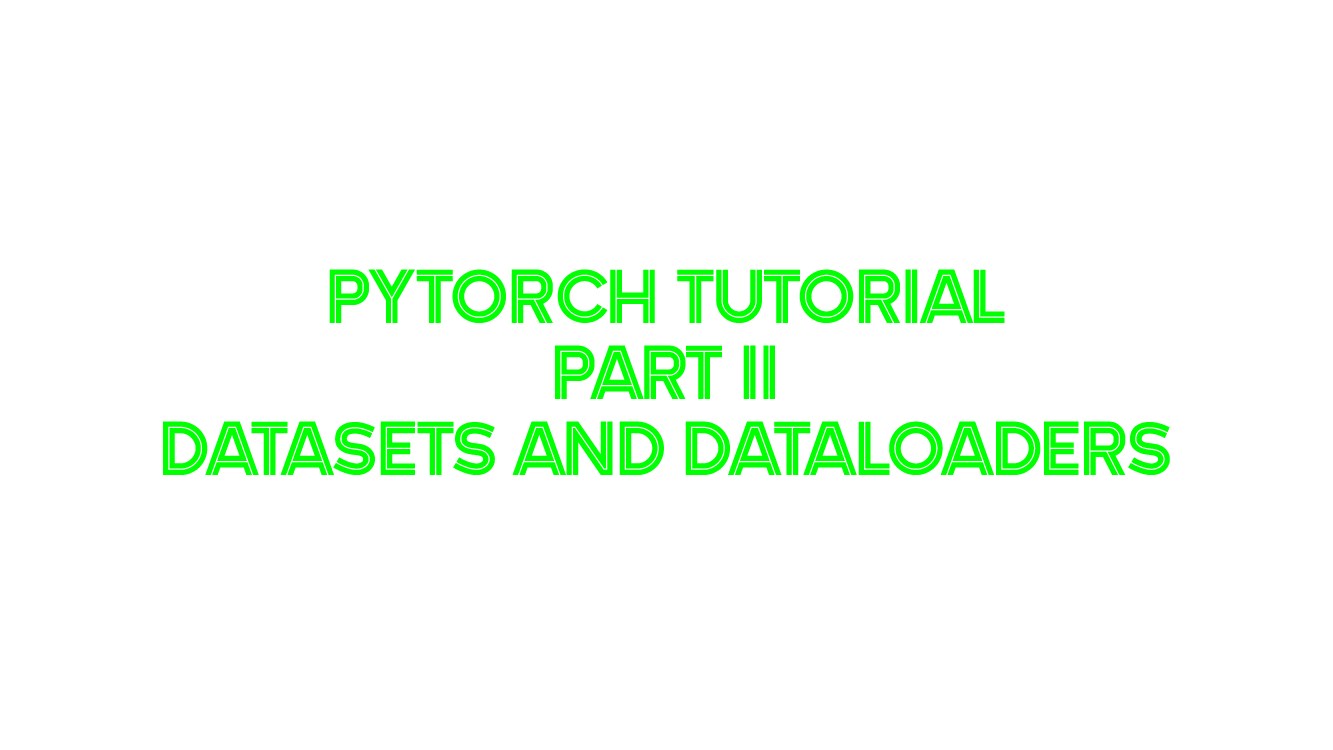
<style>
.page{position:relative;width:1333px;height:750px;background:#ffffff}
.page>*{position:absolute;margin:0}
.t1{font:78.7px/76px "Green-Regular";letter-spacing:-0.025em;color:#00ff00}
</style>
<div class="page">
<p class="t1" style="left:163px;top:269px;width:1007px;height:206px;text-align:center">PyTorch Tutorial<br>Part II<br>DATASETS and DATALOADERS</p>
</div>
